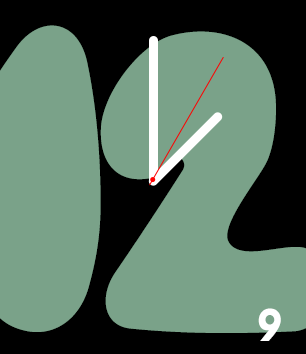
<style>
.page{position:relative;width:306px;height:354px;background:#7aa289}
.page>*{position:absolute;margin:0}
.t1{font:45px "FuturaBT-BoldItalic";letter-spacing:-0.035em;color:#ffffff;scale:0.92 1}
</style>
<div class="page">
<p class="t1" style="left:258px;top:308px;width:23px;height:33px">9</p>
</div>
